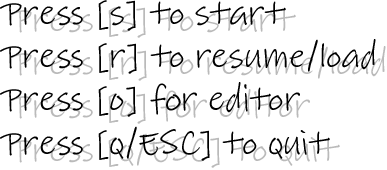
<style>
.page{position:relative;width:387px;height:170px;background:#ffffff}
.page>*{position:absolute;margin:0}
.t1{font:36px "Lindsey";color:#000000}
</style>
<div class="page">
<p class="t1" style="left:0px;top:0px;width:376px;height:161px">Press [s] to start<br>Press [r] to resume/load <br>Press [o] for editor<br>Press [q/ESC] to quit</p>
</div>
